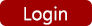
<style>
.page{position:relative;width:92px;height:26px;background:#a10000}
.page>*{position:absolute;margin:0}
.t1{font:17.2px "MicrosoftJhengHeiUIRegular";color:#ffffff}
</style>
<div class="page">
<p class="t1" style="left:24px;top:6px;width:43px;height:19px">Login</p>
</div>
